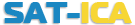
<style>
.page{position:relative;width:135px;height:25px;background:#ffffff}
.page>*{position:absolute;margin:0}
.t1{font:28.6px "MagistralBlack";color:#1a87c2}
.t2{font:28.6px "MagistralBlack";color:#f7d634}
</style>
<div class="page">
<p class="t1" style="left:4px;top:2px;width:128px;height:21px">SAT-<span class="t2">ICA</span></p>
</div>
